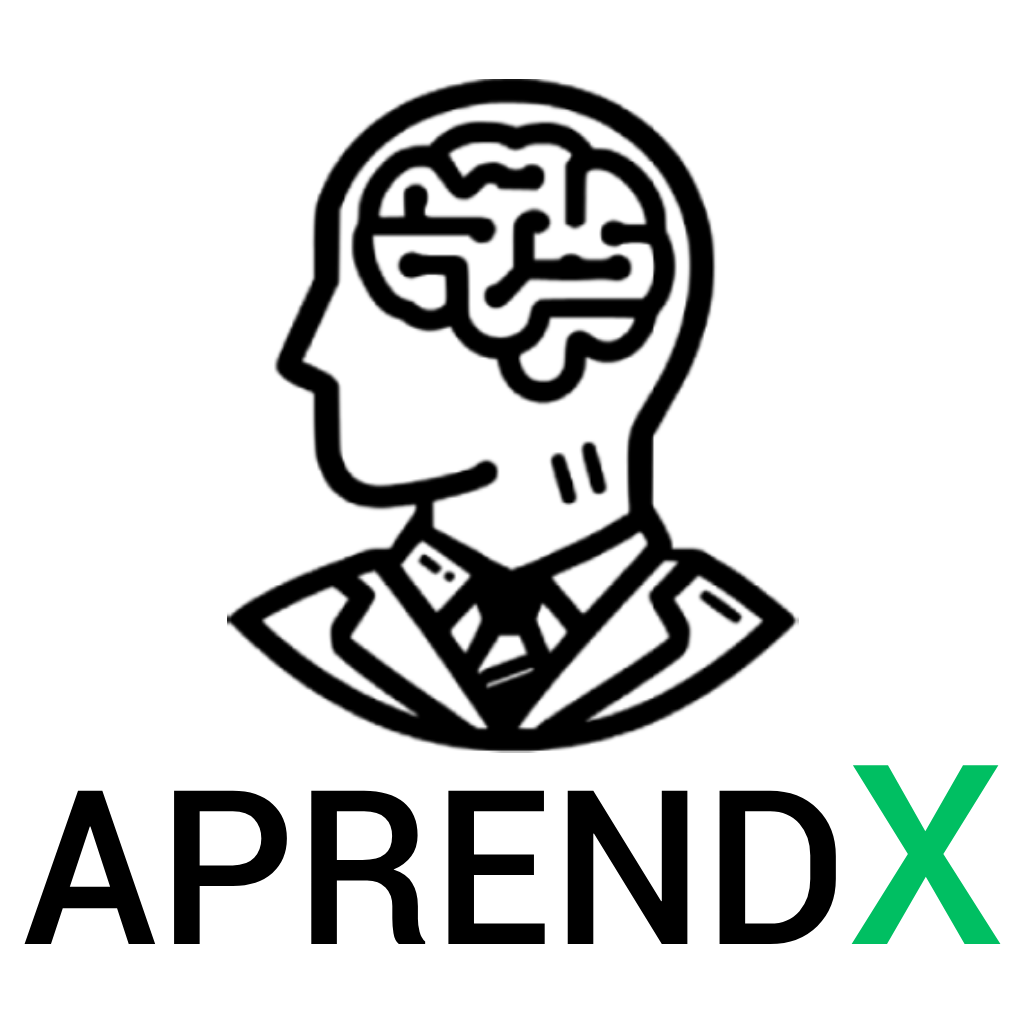
<style>
.page{position:relative;width:1024px;height:1024px;background:#ffffff}
.page>*{position:absolute;margin:0}
.t1{font:215.5px "Roboto-Medium";color:#000000}
.t2{font:251.4px "Roboto-Medium";color:#00bf62}
</style>
<div class="page">
<p class="t1" style="left:24px;top:765px;width:977px;height:179px">APREND<span class="t2">X</span></p>
</div>
